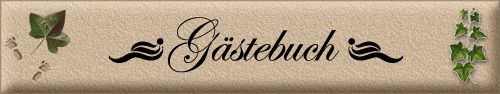
<style>
.page{position:relative;width:500px;height:94px}
.page>*{position:absolute;margin:0}
.t1{font:60px "EdwardianScriptITC";color:#000000}
.t2{font:72px "EdwardianScriptITC";color:#000000}
.t3{font:30px "AbsinthFlourishesII";color:#000000}
</style>
<div class="page">
<p class="t1" style="left:108px;top:17px;width:295px;height:56px"><span class="t2">     </span><span class="t3">O</span>Gästebuch <span class="t3">N</span></p>
</div>
